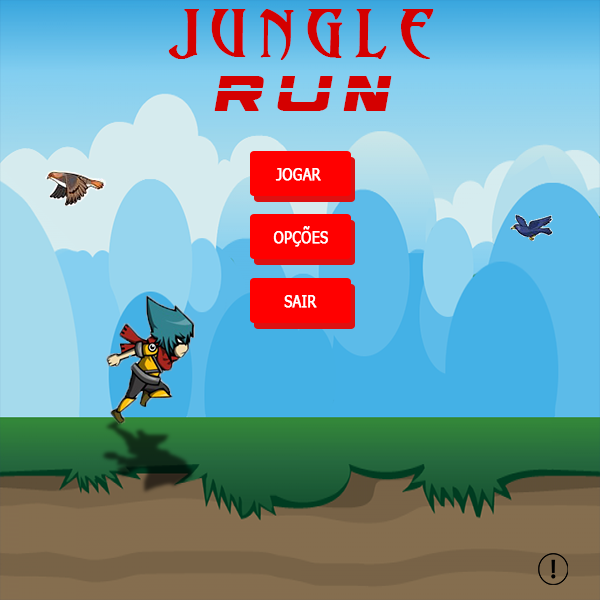
<style>
.page{position:relative;width:600px;height:600px}
.page>*{position:absolute;margin:0}
.t1{font:60px "Abaddon";letter-spacing:0.2em;color:#d40000;font-weight:bold}
.t2{font:60px "Borg9";letter-spacing:0.2em;color:#d40000;font-weight:bold;font-style:italic}
.t3{font:16.7px "Tahoma";color:#ffffff;font-weight:bold;scale:0.85 1}
</style>
<div class="page">
<p class="t1" style="left:168px;top:9px;width:266px;height:51px">JUNGLE</p>
<p class="t2" style="left:214px;top:76px;width:178px;height:35px">run</p>
<p class="t3" style="left:275px;top:168px;width:46px;height:13px">JOGAR</p>
<p class="t3" style="left:273px;top:226px;width:55px;height:21px">OPÇÕES</p>
<p class="t3" style="left:284px;top:295px;width:33px;height:13px">SAIR</p>
</div>
